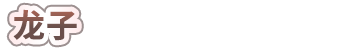
<style>
.page{position:relative;width:360px;height:50px;background:#ffffff}
.page>*{position:absolute;margin:0}
.t1{font:32px "SourceHanSansSC-Bold";color:#73534d;font-weight:bold}
</style>
<div class="page">
<p class="t1" style="left:13px;top:9px;width:64px;height:32px">龙子</p>
</div>
